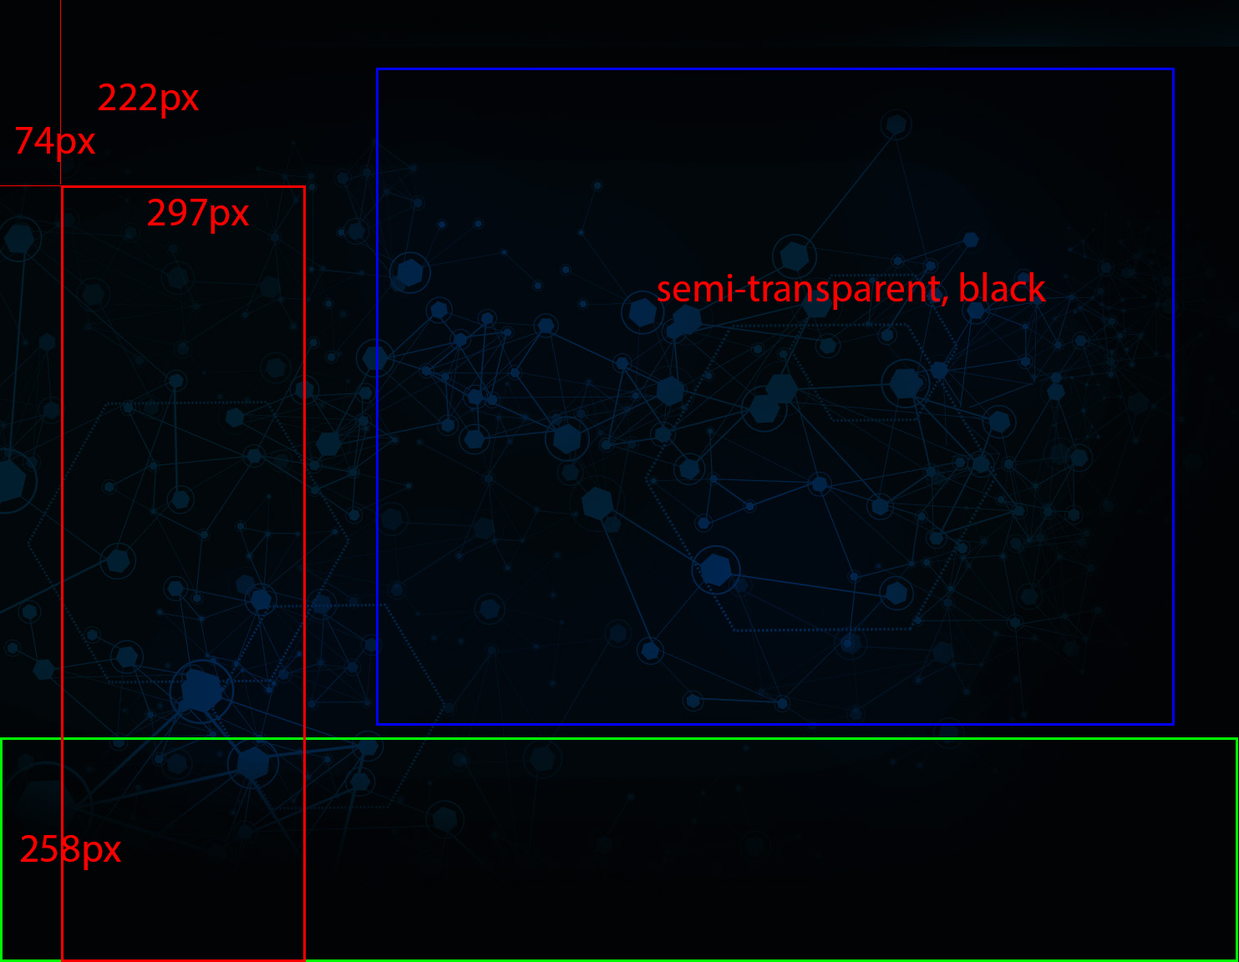
<style>
.page{position:relative;width:1239px;height:962px;background:#020305}
.page>*{position:absolute;margin:0}
.t1{font:40.1px "MyriadPro-Regular";color:#ff0000}
</style>
<div class="page">
<p class="t1" style="left:99px;top:84px;width:100px;height:35px">222px</p>
<p class="t1" style="left:148px;top:199px;width:101px;height:35px">297px</p>
<p class="t1" style="left:657px;top:272px;width:390px;height:38px">semi-transparent, black</p>
<p class="t1" style="left:21px;top:835px;width:100px;height:36px">258px</p>
</div>
